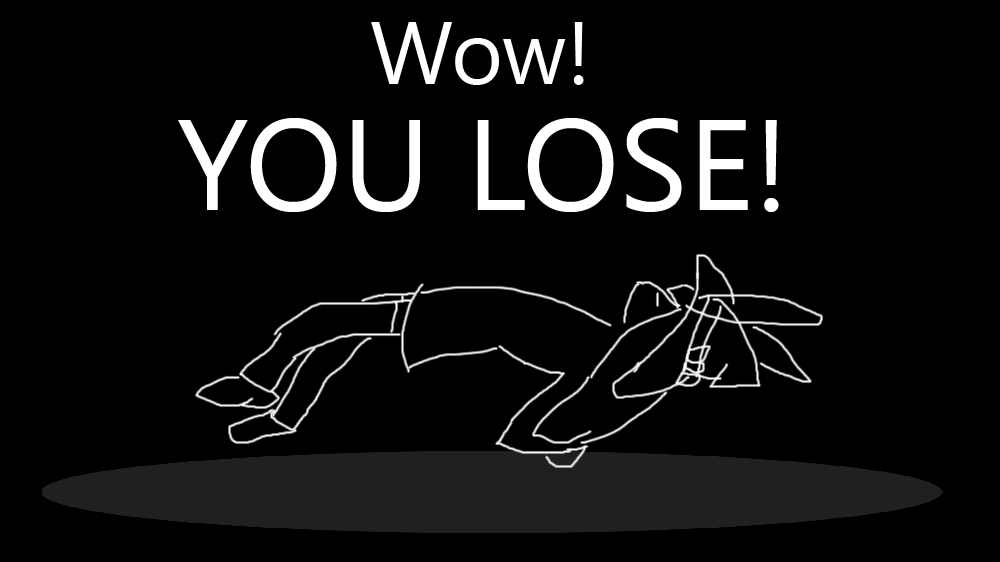
<style>
.page{position:relative;width:1000px;height:562px;background:#000000}
.page>*{position:absolute;margin:0}
.t1{font:88.5px "Gadugi";color:#ffffff}
.t2{font:128.7px "Gadugi";color:#ffffff}
</style>
<div class="page">
<p class="t1" style="left:371px;top:22px;width:213px;height:63px">Wow!</p>
<p class="t2" style="left:178px;top:118px;width:601px;height:94px">YOU LOSE!</p>
</div>
